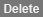
<style>
.page{position:relative;width:43px;height:17px;background:#777777}
.page>*{position:absolute;margin:0}
.t1{font:12px "Arial-BoldMT";color:#eeeeee}
</style>
<div class="page">
<p class="t1" style="left:4px;top:4px;width:36px;height:9px">Delete</p>
</div>
